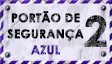
<style>
.page{position:relative;width:112px;height:64px}
.page>*{position:absolute;margin:0}
.t1{font:12px/16px "CenturyGothic-Bold";letter-spacing:0.005em;text-transform:uppercase;font-weight:bold}
.t2{font:41.3px "CenturyGothic-Bold";letter-spacing:0.005em;text-transform:uppercase;font-weight:bold}
</style>
<div class="page">
<p class="t1" style="left:7px;top:11px;width:77px;height:44px;text-align:center">PORTÃO DE<br>SEGURANÇA<br>AZUL</p>
<p class="t2" style="left:84px;top:15px;width:23px;height:32px">2</p>
</div>
